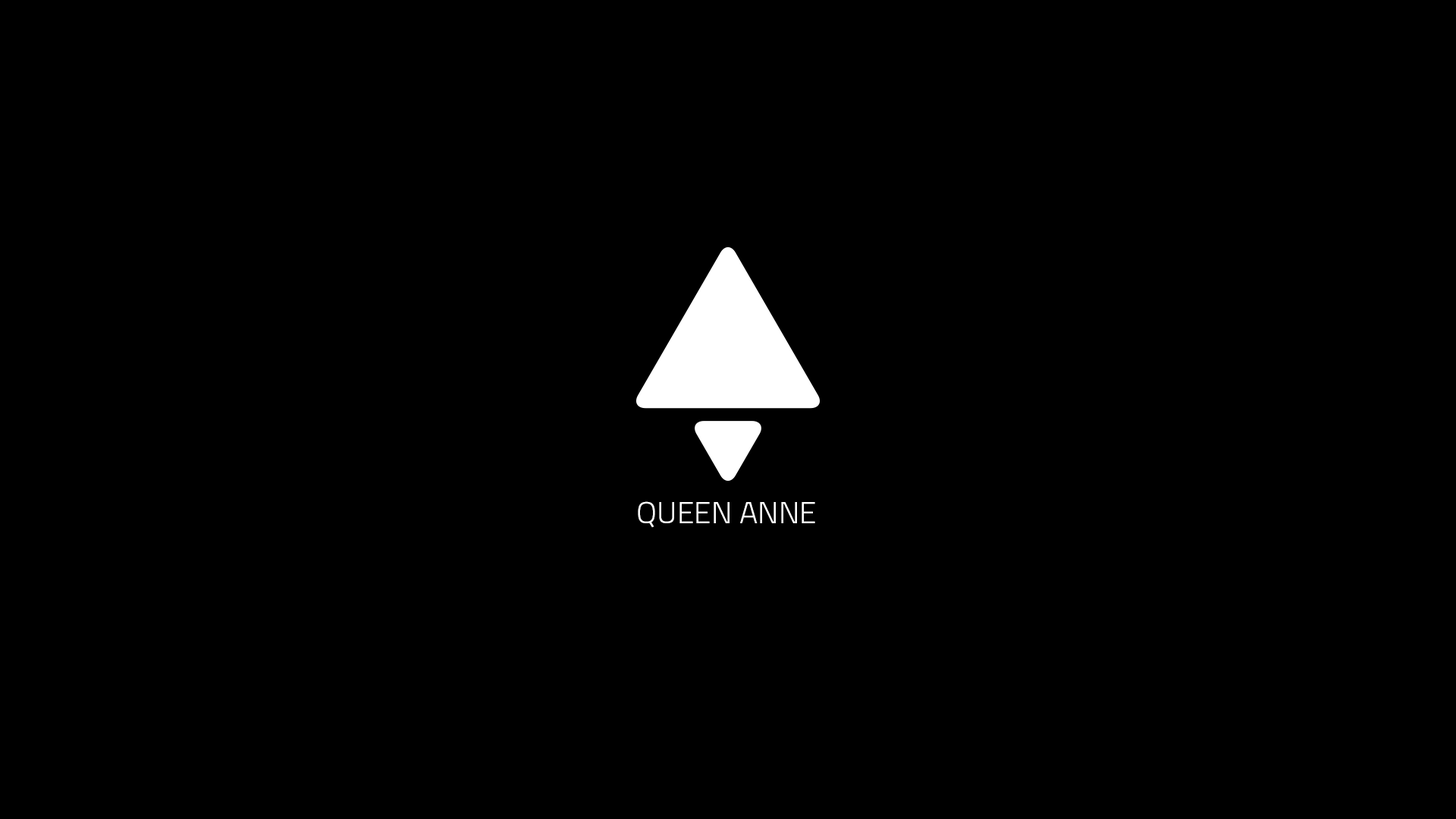
<style>
.page{position:relative;width:1456px;height:819px;background:#000000}
.page>*{position:absolute;margin:0}
.t1{font:30.3px "Titillium-Light";color:#fffefe}
</style>
<div class="page">
<p class="t1" style="left:638px;top:501px;width:177px;height:27px">QUEEN ANNE</p>
</div>
